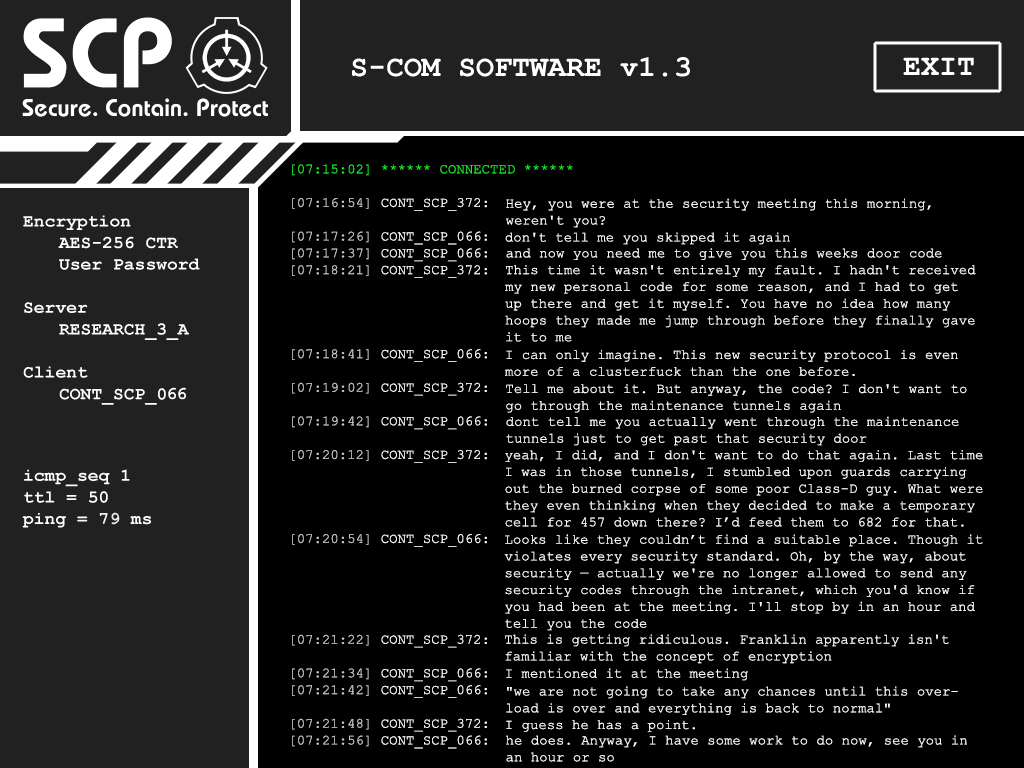
<style>
.page{position:relative;width:1024px;height:768px;background:#000000}
.page>*{position:absolute;margin:0}
.t1{font:14px "CourierNewPSMT";color:#1def29}
.t2{font:14px "CourierNewPSMT";color:#cac9c9}
.t3{font:14px "CourierNewPSMT";color:#ffffff}
</style>
<div class="page">
<p class="t1" style="left:292px;top:164px;width:281px;height:585px">[07:15:02] ****** CONNECTED ******<br><br><span class="t2">[07:16:54]</span><span class="t3"> CONT_SCP_372:  <br><br></span><span class="t2">[07:17:26]</span><span class="t3"> CONT_SCP_066: <br></span><span class="t2">[07:17:37]</span><span class="t3"> CONT_SCP_066: <br></span><span class="t2">[07:18:21]</span><span class="t3"> CONT_SCP_372: <br><br><br><br><br></span><span class="t2">[07:18:41]</span><span class="t3"> CONT_SCP_066: <br><br></span><span class="t2">[07:19:02]</span><span class="t3"> CONT_SCP_372: <br><br></span><span class="t2">[07:19:42]</span><span class="t3"> CONT_SCP_066: <br><br></span><span class="t2">[07:20:12]</span><span class="t3"> CONT_SCP_372: <br><br><br><br><br></span><span class="t2">[07:20:54]</span><span class="t3"> CONT_SCP_066: <br><br><br><br><br><br></span><span class="t2">[07:21:22]</span><span class="t3"> CONT_SCP_372: <br><br></span><span class="t2">[07:21:34]</span><span class="t3"> CONT_SCP_066: <br></span><span class="t2">[07:21:42]</span><span class="t3"> CONT_SCP_066: <br><br></span><span class="t2">[07:21:48]</span><span class="t3"> CONT_SCP_372: <br></span><span class="t2">[07:21:56]</span><span class="t3"> CONT_SCP_066:</span></p>
<p class="t3" style="left:506px;top:198px;width:425px;height:30px">Hey, you were at the security meeting this morning,<br>weren't you?</p>
<p class="t3" style="left:505px;top:232px;width:285px;height:13px">don't tell me you skipped it again</p>
<p class="t3" style="left:506px;top:248px;width:436px;height:12px">and now you need me to give you this weeks door code</p>
<p class="t3" style="left:505px;top:265px;width:471px;height:77px">This time it wasn't entirely my fault. I hadn't received<br>my new personal code for some reason, and I had to get<br>up there and get it myself. You have no idea how many<br>hoops they made me jump through before they finally gave<br>it to me</p>
<p class="t3" style="left:505px;top:350px;width:453px;height:26px">I can only imagine. This new security protocol is even<br>more of a clusterfuck than the one before.</p>
<p class="t3" style="left:506px;top:384px;width:461px;height:29px">Tell me about it. But anyway, the code? I don't want to<br>go through the maintenance tunnels again</p>
<p class="t3" style="left:506px;top:416px;width:453px;height:30px">dont tell me you actually went through the maintenance<br>tunnels just to get past that security door</p>
<p class="t3" style="left:505px;top:450px;width:478px;height:77px">yeah, I did, and I don't want to do that again. Last time I was in those tunnels, I stumbled upon guards carrying out the burned corpse of some poor Class-D guy. What were they even thinking when they decided to make a temporary cell for 457 down there? I’d feed them to 682 for that.</p>
<p class="t3" style="left:504px;top:534px;width:479px;height:97px">Looks like they couldn’t find a suitable place. Though it violates every security standard. Oh, by the way, about security — actually we're no longer allowed to send any security codes through the intranet, which you'd know if you had been at the meeting. I'll stop by in an hour and tell you the code</p>
<p class="t3" style="left:505px;top:634px;width:444px;height:30px">This is getting ridiculous. Franklin apparently isn't familiar with the concept of encryption</p>
<p class="t3" style="left:506px;top:668px;width:242px;height:13px">I mentioned it at the meeting</p>
<p class="t3" style="left:506px;top:686px;width:452px;height:29px">"we are not going to take any chances until this over-<br>load is over and everything is back to normal"</p>
<p class="t3" style="left:506px;top:720px;width:189px;height:12px">I guess he has a point.</p>
<p class="t3" style="left:506px;top:735px;width:461px;height:27px">he does. Anyway, I have some work to do now, see you in an hour or so</p>
</div>
